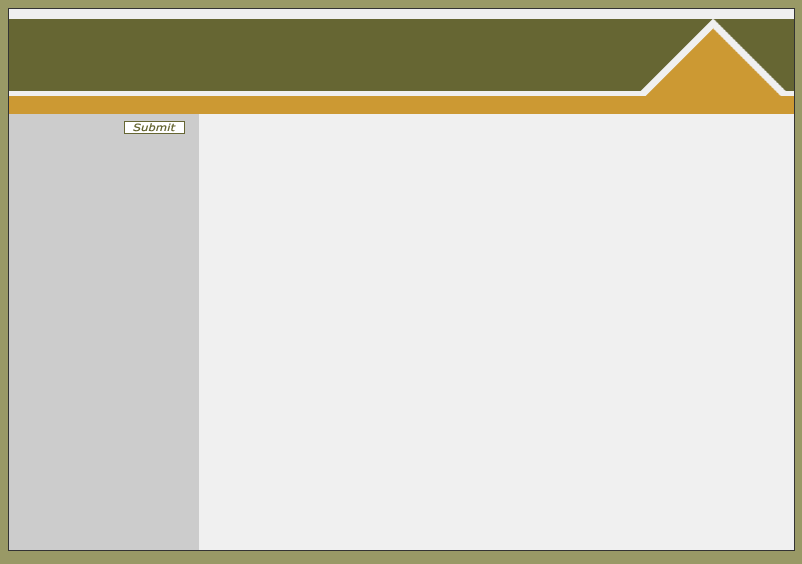
<style>
.page{position:relative;width:802px;height:564px;background:#f0f0f0}
.page>*{position:absolute;margin:0}
.t1{font:10px "Verdana-Italic";letter-spacing:0.018em;color:#666633;scale:1.15 1}
</style>
<div class="page">
<p class="t1" style="left:133px;top:123px;width:43px;height:9px">Submit</p>
</div>
